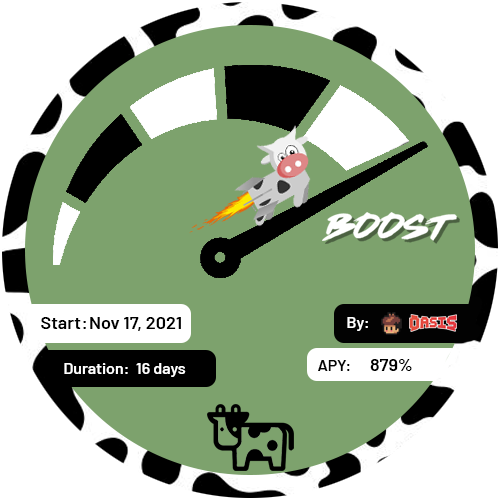
<style>
.page{position:relative;width:500px;height:500px;background:#7da26d}
.page>*{position:absolute;margin:0}
.t1{font:18px "Barlow-SemiBold";color:#000000}
.t2{font:16px "Barlow-SemiBold";color:#ffffff}
.t3{font:16px "Barlow-SemiBold";color:#020202}
</style>
<div class="page">
<p class="t1" style="left:41px;top:317px;width:45px;height:12px">Start:</p>
<p class="t1" style="left:90px;top:317px;width:91px;height:14px">Nov 17, 2021</p>
<p class="t2" style="left:347px;top:317px;width:21px;height:14px">By:</p>
<p class="t2" style="left:64px;top:363px;width:64px;height:11px">Duration:</p>
<p class="t2" style="left:136px;top:363px;width:50px;height:14px">16 days</p>
<p class="t3" style="left:318px;top:360px;width:32px;height:11px">APY:</p>
<p class="t1" style="left:370px;top:359px;width:42px;height:12px">879%</p>
</div>
